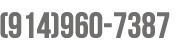
<style>
.page{position:relative;width:180px;height:50px;background:#ffffff}
.page>*{position:absolute;margin:0}
.t1{font:36px "BebasNeue";letter-spacing:-0.025em;color:#706f6e;font-weight:bold}
</style>
<div class="page">
<p class="t1" style="left:0px;top:12px;width:170px;height:26px">(914)960-7387</p>
</div>
